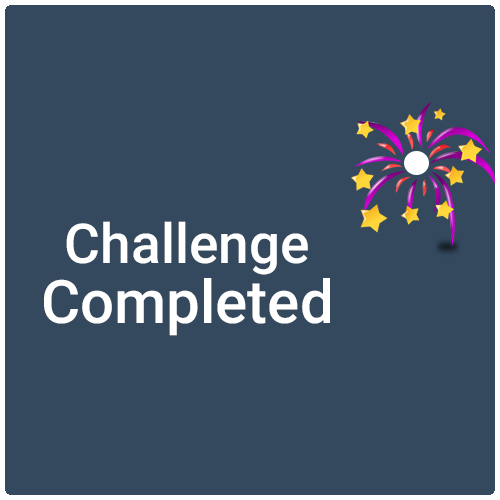
<style>
.page{position:relative;width:500px;height:500px;background:#34495e}
.page>*{position:absolute;margin:0}
.t1{font:55px "Roboto-Medium";color:#ffffff}
.t2{font:60px "Roboto-Medium";color:#ffffff}
</style>
<div class="page">
<p class="t1" style="left:44px;top:221px;width:286px;height:115px;text-align:center">Challenge<br><span class="t2">Completed</span></p>
</div>
